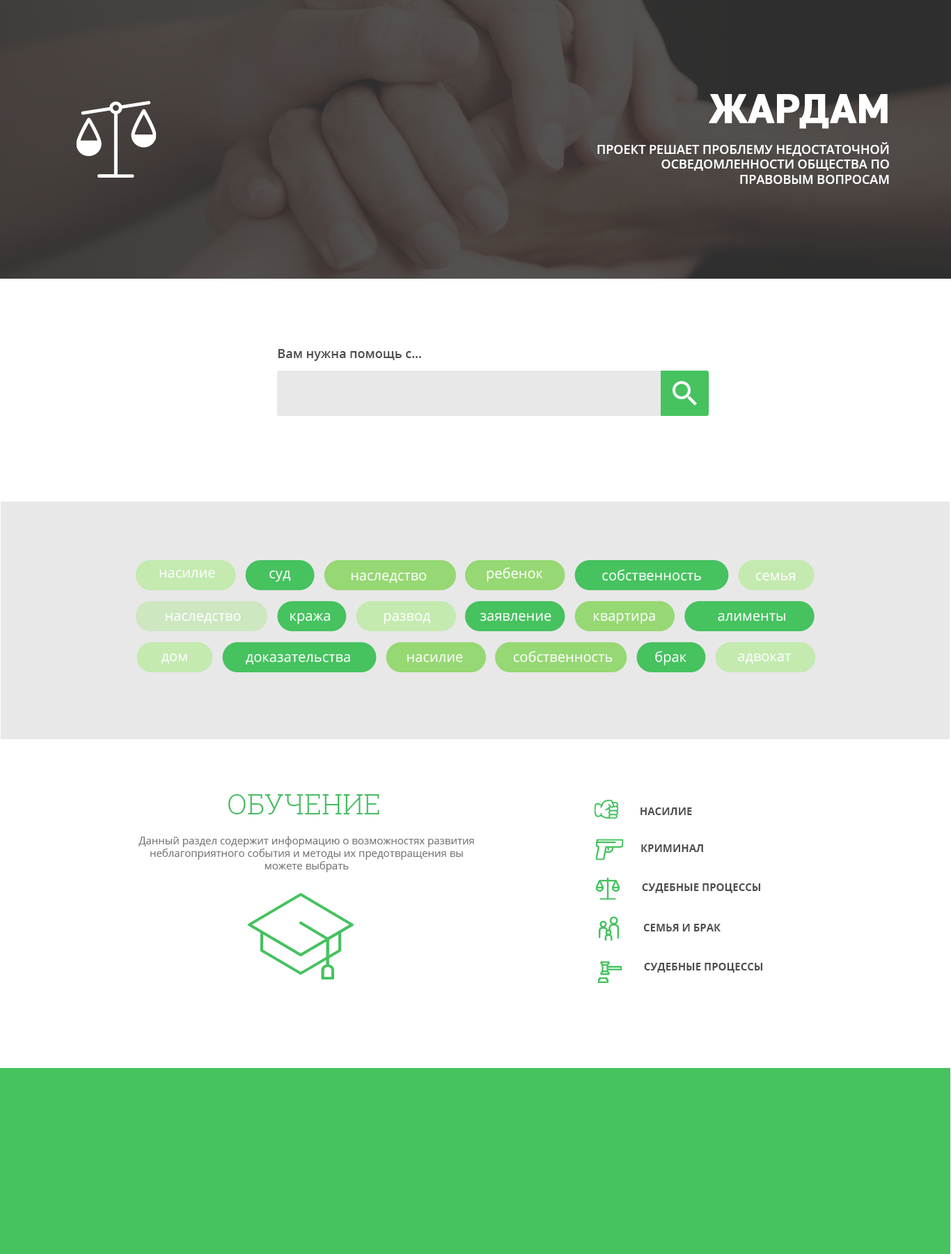
<style>
.page{position:relative;width:951px;height:1254px;background:#ffffff}
.page>*{position:absolute;margin:0}
.t1{font:41.8px "DIN2014-Bold";color:#ffffff;text-transform:uppercase;font-weight:bold}
.t2{font:12.5px "OpenSans-SemiBold";color:#ffffff;text-transform:uppercase}
.t3{font:12.5px "OpenSans-SemiBold";color:#4d4d4d}
.t4{font:27.9px "RobotoSlab-Light";color:#46bd62}
.t5{font:10.4px "OpenSans-Bold";color:#4d4d4d;text-transform:uppercase}
.t6{font:10.4px "OpenSans-Regular";color:#777777}
</style>
<div class="page">
<p class="t1" style="left:709px;top:94px;width:179px;height:35px">ЖАРДАМ</p>
<p class="t2" style="left:598px;top:142px;width:291px;height:42px;text-align:right">Проект решает проблему недостаточной осведомленности общества по правовым вопросам</p>
<p class="t3" style="left:278px;top:349px;width:143px;height:12px">Вам нужна помощь с...</p>
<p class="t4" style="left:228px;top:794px;width:152px;height:20px">ОБУЧЕНИЕ</p>
<p class="t5" style="left:641px;top:807px;width:51px;height:8px">насилие</p>
<p class="t6" style="left:139px;top:836px;width:335px;height:36px;text-align:center">Данный раздел содержит информацию о возможностях развития <br>неблагоприятного события и методы их предотвращения вы можете выбрать</p>
<p class="t5" style="left:641px;top:844px;width:62px;height:8px">криминал</p>
<p class="t5" style="left:642px;top:883px;width:118px;height:10px">судебные процессы</p>
<p class="t5" style="left:643px;top:923px;width:78px;height:8px">семья и брак</p>
<p class="t5" style="left:644px;top:962px;width:119px;height:10px">судебные процессы</p>
</div>
